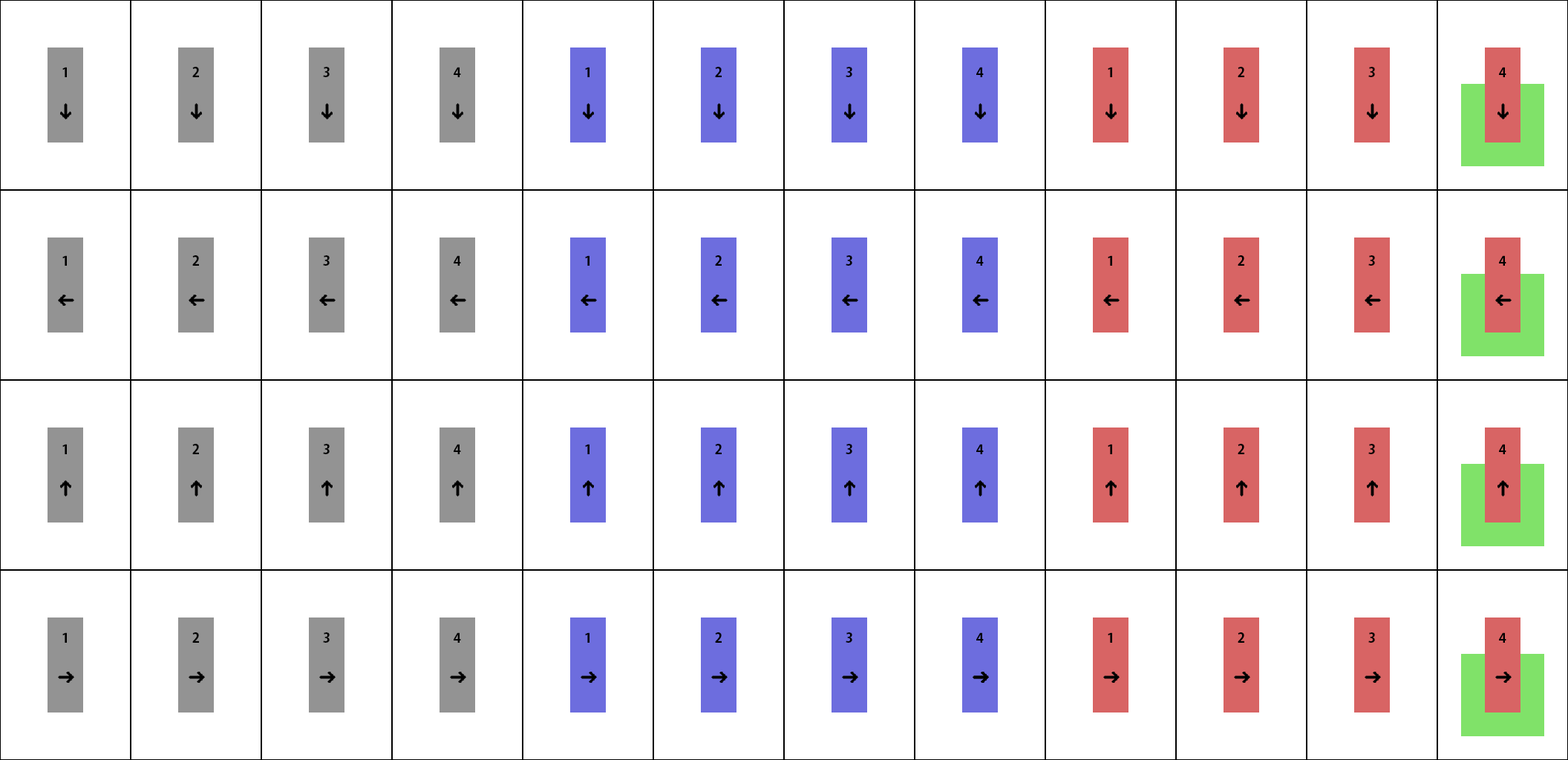
<style>
.page{position:relative;width:1568px;height:760px;background:#ffffff}
.page>*{position:absolute;margin:0}
.t1{font:13.4px "KozGoPr6N-Bold";color:#000000}
</style>
<div class="page">
<p class="t1" style="left:62px;top:67px;width:5px;height:10px">1</p>
<p class="t1" style="left:192px;top:67px;width:7px;height:10px">2</p>
<p class="t1" style="left:323px;top:67px;width:7px;height:10px">3</p>
<p class="t1" style="left:454px;top:67px;width:7px;height:10px">4</p>
<p class="t1" style="left:585px;top:67px;width:4px;height:10px">1</p>
<p class="t1" style="left:715px;top:67px;width:7px;height:10px">2</p>
<p class="t1" style="left:846px;top:67px;width:6px;height:10px">3</p>
<p class="t1" style="left:976px;top:67px;width:8px;height:10px">4</p>
<p class="t1" style="left:1108px;top:67px;width:4px;height:10px">1</p>
<p class="t1" style="left:1238px;top:67px;width:6px;height:10px">2</p>
<p class="t1" style="left:1368px;top:67px;width:7px;height:10px">3</p>
<p class="t1" style="left:1499px;top:67px;width:7px;height:10px">4</p>
<p class="t1" style="left:62px;top:255px;width:5px;height:11px">1</p>
<p class="t1" style="left:192px;top:255px;width:7px;height:11px">2</p>
<p class="t1" style="left:323px;top:255px;width:7px;height:11px">3</p>
<p class="t1" style="left:454px;top:255px;width:7px;height:11px">4</p>
<p class="t1" style="left:585px;top:255px;width:4px;height:11px">1</p>
<p class="t1" style="left:715px;top:255px;width:7px;height:11px">2</p>
<p class="t1" style="left:846px;top:255px;width:6px;height:11px">3</p>
<p class="t1" style="left:976px;top:255px;width:8px;height:11px">4</p>
<p class="t1" style="left:1108px;top:255px;width:4px;height:11px">1</p>
<p class="t1" style="left:1238px;top:255px;width:6px;height:11px">2</p>
<p class="t1" style="left:1368px;top:255px;width:7px;height:11px">3</p>
<p class="t1" style="left:1499px;top:255px;width:7px;height:11px">4</p>
<p class="t1" style="left:62px;top:444px;width:5px;height:10px">1</p>
<p class="t1" style="left:192px;top:444px;width:7px;height:10px">2</p>
<p class="t1" style="left:323px;top:444px;width:7px;height:10px">3</p>
<p class="t1" style="left:454px;top:444px;width:7px;height:10px">4</p>
<p class="t1" style="left:585px;top:444px;width:4px;height:10px">1</p>
<p class="t1" style="left:715px;top:444px;width:7px;height:10px">2</p>
<p class="t1" style="left:846px;top:444px;width:6px;height:10px">3</p>
<p class="t1" style="left:976px;top:444px;width:8px;height:10px">4</p>
<p class="t1" style="left:1108px;top:444px;width:4px;height:10px">1</p>
<p class="t1" style="left:1238px;top:444px;width:6px;height:10px">2</p>
<p class="t1" style="left:1368px;top:444px;width:7px;height:10px">3</p>
<p class="t1" style="left:1499px;top:444px;width:7px;height:10px">4</p>
<p class="t1" style="left:62px;top:633px;width:5px;height:10px">1</p>
<p class="t1" style="left:192px;top:633px;width:7px;height:10px">2</p>
<p class="t1" style="left:323px;top:633px;width:7px;height:10px">3</p>
<p class="t1" style="left:454px;top:633px;width:7px;height:10px">4</p>
<p class="t1" style="left:585px;top:633px;width:4px;height:10px">1</p>
<p class="t1" style="left:715px;top:633px;width:7px;height:10px">2</p>
<p class="t1" style="left:846px;top:633px;width:6px;height:10px">3</p>
<p class="t1" style="left:976px;top:633px;width:8px;height:10px">4</p>
<p class="t1" style="left:1108px;top:633px;width:4px;height:10px">1</p>
<p class="t1" style="left:1238px;top:633px;width:6px;height:10px">2</p>
<p class="t1" style="left:1368px;top:633px;width:7px;height:10px">3</p>
<p class="t1" style="left:1499px;top:633px;width:7px;height:10px">4</p>
</div>
